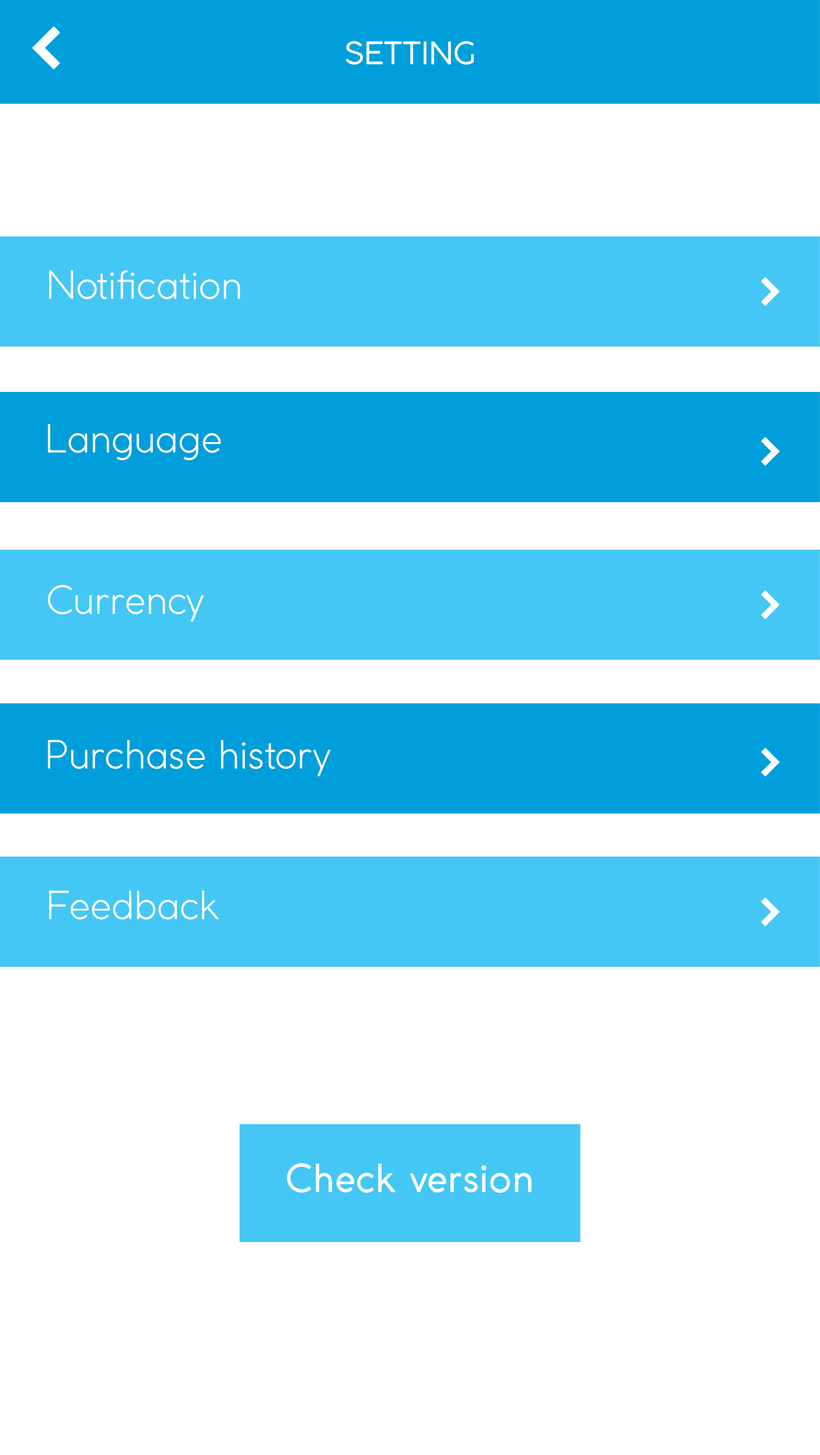
<style>
.page{position:relative;width:820px;height:1455px;background:#ffffff}
.page>*{position:absolute;margin:0}
.t1{font:30.7px "CocoGothic";color:#ffffff}
.t2{font:38.4px "CocoGothic-Light";color:#ffffff}
.t3{font:38.4px "CocoGothic";color:#ffffff}
</style>
<div class="page">
<p class="t1" style="left:345px;top:41px;width:129px;height:24px">SETTING</p>
<p class="t2" style="left:49px;top:270px;width:191px;height:29px">Notification</p>
<p class="t2" style="left:48px;top:424px;width:173px;height:36px">Language</p>
<p class="t2" style="left:48px;top:585px;width:156px;height:36px">Currency</p>
<p class="t2" style="left:48px;top:740px;width:282px;height:36px">Purchase history</p>
<p class="t2" style="left:49px;top:890px;width:170px;height:29px">Feedback</p>
<p class="t3" style="left:287px;top:1163px;width:244px;height:30px">Check version</p>
</div>
